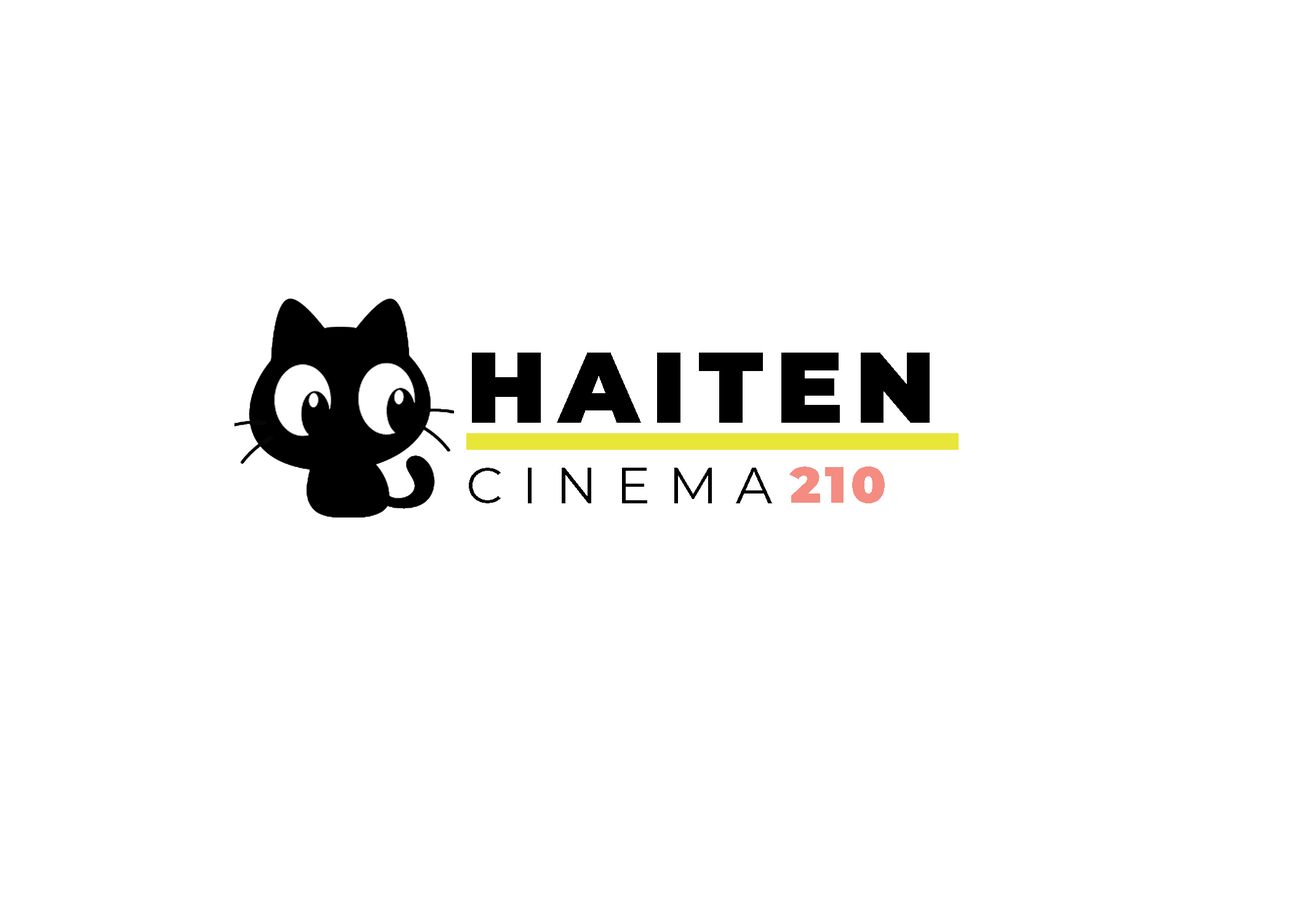
<style>
.page{position:relative;width:1292px;height:923px;background:#ffffff}
.page>*{position:absolute;margin:0}
.t1{font:100px "Montserrat-Black";letter-spacing:0.12em;color:#000000}
.t2{font:51.3px "Montserrat-Regular";letter-spacing:0.36em;color:#000000}
.t3{font:51.3px "Montserrat-Black";letter-spacing:0.08em;color:#f48c81}
</style>
<div class="page">
<p class="t1" style="left:472px;top:353px;width:458px;height:70px">HAITEN</p>
<p class="t2" style="left:469px;top:468px;width:303px;height:35px">CINEMA</p>
<p class="t3" style="left:789px;top:466px;width:96px;height:37px">210</p>
</div>
